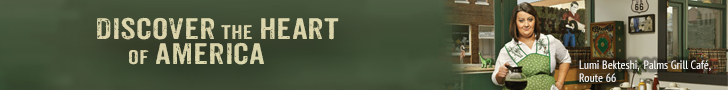
<style>
.page{position:relative;width:728px;height:90px}
.page>*{position:absolute;margin:0}
.t1{font:28.8px/24.9px "Anodyne";color:#dad4ab;scale:1.26 1}
.t2{font:19.7px/24.9px "Anodyne";color:#dad4ab;scale:1.26 1}
.t3{font:19.2px/24.9px "Anodyne";color:#dad4ab;scale:1.26 1}
.t4{font:12px/13px "PTSans-Narrow";color:#fbfaf9}
.t5{font:12px/9px "PTSans-Narrow";color:#fbfaf9}
</style>
<div class="page">
<p class="t1" style="left:97px;top:17px;width:242px;height:48px"><span class="t2">       </span>Discover<span class="t3"> the </span>heart<br><span class="t3">              of </span>america</p>
<p class="t4" style="left:579px;top:60px;width:132px;height:22px"><span class="t5">Lumi Bekteshi,  </span>Palms Grill Café,<br>Route 66</p>
</div>
